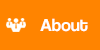
<style>
.page{position:relative;width:100px;height:50px;background:#ff8400}
.page>*{position:absolute;margin:0}
.t1{font:18px "CoolveticaRg-Regular";color:#ffffff}
</style>
<div class="page">
<p class="t1" style="left:40px;top:18px;width:48px;height:14px">About</p>
</div>
